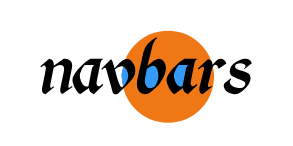
<style>
.page{position:relative;width:293px;height:146px;background:#ffffff}
.page>*{position:absolute;margin:0}
.t1{font:80px "Kingthings-Calligraphica-Italic";color:#000000}
</style>
<div class="page">
<p class="t1" style="left:40px;top:37px;width:212px;height:59px">navbars</p>
</div>
